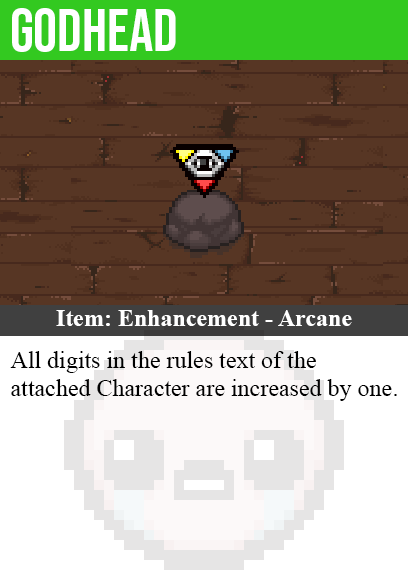
<style>
.page{position:relative;width:408px;height:585px;background:#573624}
.page>*{position:absolute;margin:0}
.t1{font:60px "BebasNeue-Regular";color:#ffffff}
.t2{font:24px "TimesNewRomanPS-BoldMT";color:#ffffff}
.t3{font:24px "TimesNewRomanPSMT";color:#000000}
</style>
<div class="page">
<p class="t1" style="left:12px;top:8px;width:164px;height:44px">godhead</p>
<p class="t2" style="left:56px;top:310px;width:296px;height:16px">Item: Enhancement - Arcane</p>
<p class="t3" style="left:10px;top:351px;width:387px;height:50px">All digits in the rules text of the<br>attached Character are increased by one.</p>
</div>
